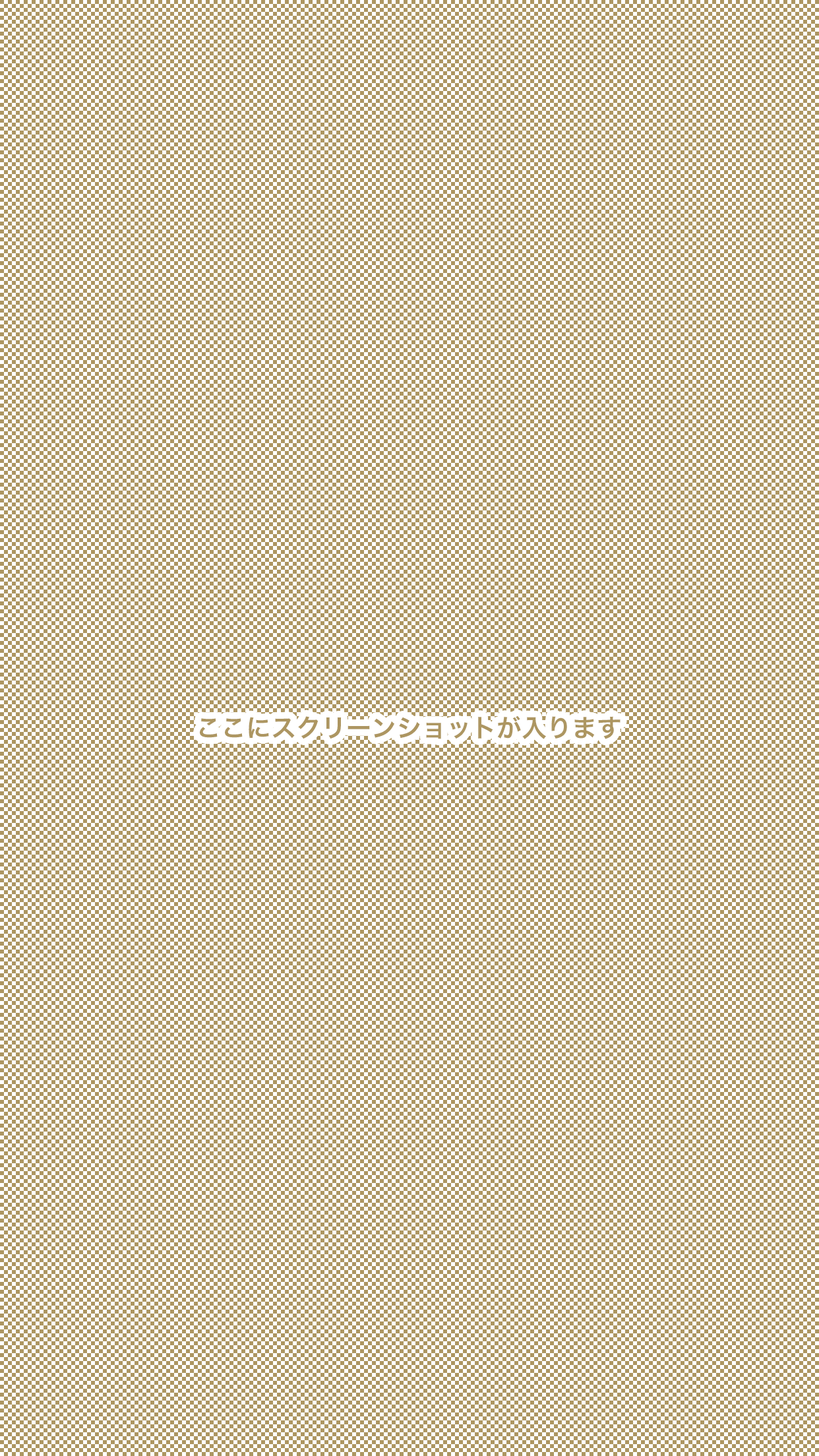
<style>
.page{position:relative;width:819px;height:1456px;background:#ffffff}
.page>*{position:absolute;margin:0}
.t1{font:25.1px "HiraKakuPro-W6";color:#ad9661}
</style>
<div class="page">
<p class="t1" style="left:200px;top:715px;width:421px;height:24px">ここにスクリーンショットが入ります</p>
</div>
